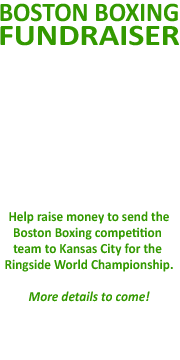
<style>
.page{position:relative;width:180px;height:360px;background:#ffffff}
.page>*{position:absolute;margin:0}
.t1{font:14px/16px "Calibri-Bold";color:#339900;scale:0.95 1}
.t2{font:27px/24px "Calibri-Bold";color:#339900;text-transform:uppercase;scale:0.95 1}
.t3{font:30px/24px "Calibri-Bold";color:#339900;text-transform:uppercase;scale:1.13 1}
.t4{font:40px/40px "Calibri-Bold";color:#ffffff;text-transform:uppercase;scale:1.13 1}
.t5{font:27px/30px "Calibri-Bold";color:#ffffff;scale:0.95 1}
.t6{font:14px/16px "Calibri-BoldItalic";color:#339900;scale:0.95 1}
.t7{font:14px/16px "Calibri-Bold";color:#ffffff;scale:0.95 1}
</style>
<div class="page">
<p class="t1" style="left:0px;top:3px;width:179px;height:349px;text-align:center"><span class="t2">Boston boxing<br></span><span class="t3">fundraiser<br><br></span><span class="t4">june 28<br></span><span class="t5">at<br><br><br><br><br><br></span>Help raise money to send the<br>Boston Boxing competition <br>team to Kansas City for the <br>Ringside World Championship.<br><br><span class="t6">More details to come!<br><br></span><span class="t7">332 Washington Street<br>Boston, MA | 617-779-8822</span></p>
</div>
